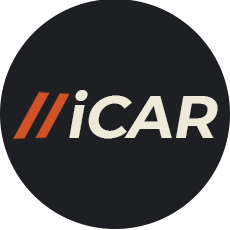
<style>
.page{position:relative;width:230px;height:230px;background:#1e1f23}
.page>*{position:absolute;margin:0}
.t1{font:60.2px "Montserrat-Bold";letter-spacing:-0.01em;color:#edead9;font-style:italic}
</style>
<div class="page">
<p class="t1" style="left:69px;top:90px;width:149px;height:49px">iCAR</p>
</div>
